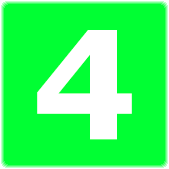
<style>
.page{position:relative;width:169px;height:169px;background:#00ff33}
.page>*{position:absolute;margin:0}
.t1{font:150px "Verdana-Bold";color:#ffffff;text-transform:uppercase}
</style>
<div class="page">
<p class="t1" style="left:37px;top:30px;width:95px;height:110px">4</p>
</div>
